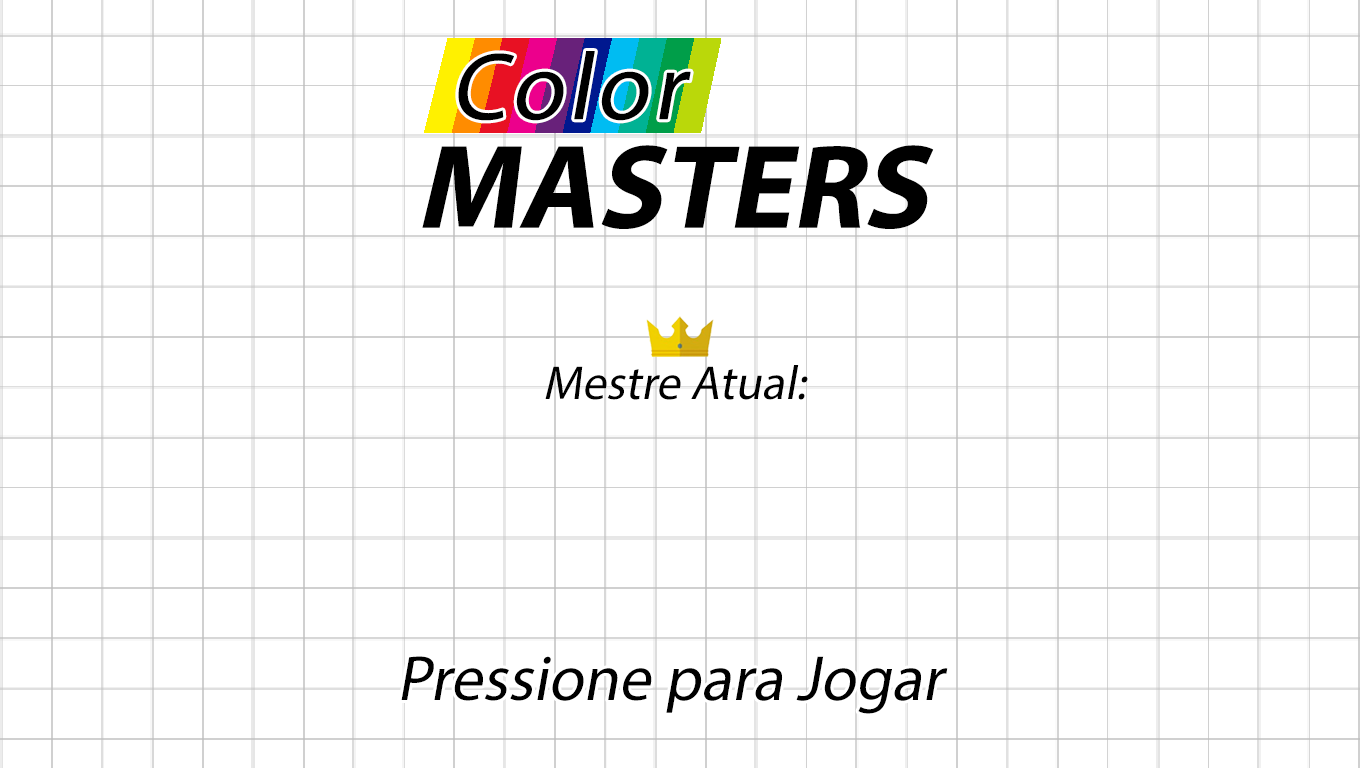
<style>
.page{position:relative;width:1360px;height:768px;background:#ffffff}
.page>*{position:absolute;margin:0}
.t1{font:96px "MyriadPro-Regular";letter-spacing:0.05em;color:#000000;font-style:italic}
.t2{font:120px "MyriadPro-Bold";color:#000000;font-style:italic}
.t3{font:48px "MyriadPro-Regular";color:#000000;font-style:italic}
.t4{font:64px "MyriadPro-Regular";color:#000000;font-style:italic}
</style>
<div class="page">
<p class="t1" style="left:458px;top:51px;width:233px;height:70px">Color</p>
<p class="t2" style="left:422px;top:145px;width:512px;height:84px">MASTERS</p>
<p class="t3" style="left:545px;top:365px;width:263px;height:35px">:Mestre Atual</p>
<p class="t4" style="left:401px;top:656px;width:547px;height:58px">Pressione para Jogar</p>
</div>
